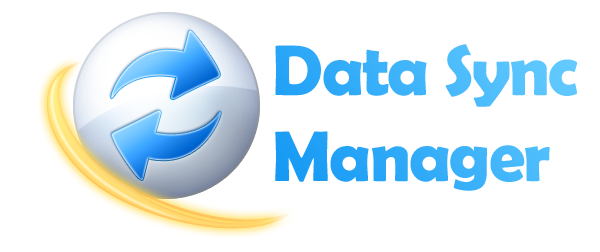
<style>
.page{position:relative;width:600px;height:252px;background:#ffffff}
.page>*{position:absolute;margin:0}
.t1{font:72px "BerlinSansFBDemi-Bold";letter-spacing:-0.025em}
</style>
<div class="page">
<p class="t1" style="left:275px;top:44px;width:303px;height:147px">Data Sync <br>Manager</p>
</div>
